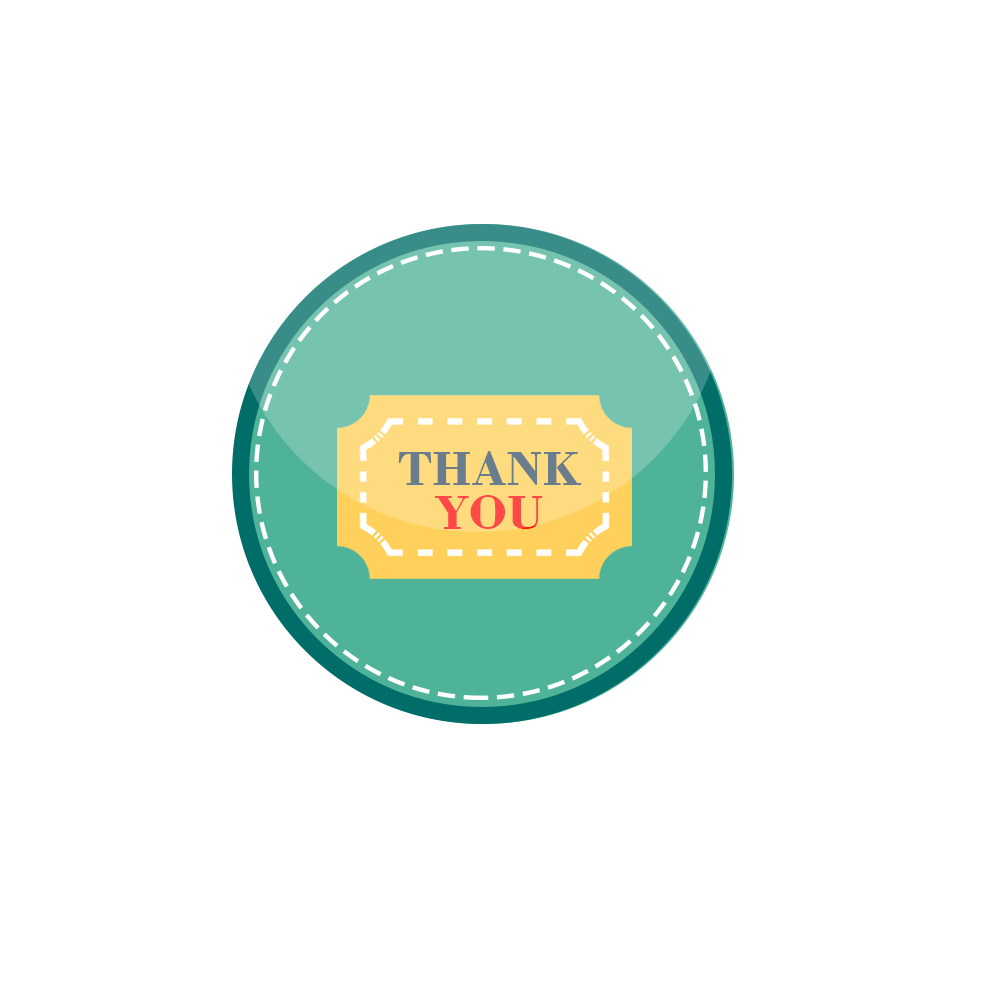
<style>
.page{position:relative;width:1000px;height:1000px;background:#ffffff}
.page>*{position:absolute;margin:0}
.t1{font:51.3px "BodoniBT-Bold";color:#6a7d8c}
.t2{font:51.3px "BodoniBT-Bold";color:#ff4848}
</style>
<div class="page">
<p class="t1" style="left:398px;top:451px;width:184px;height:34px">THANK</p>
<p class="t2" style="left:435px;top:495px;width:108px;height:34px">YOU</p>
</div>
